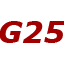
<style>
.page{position:relative;width:64px;height:64px;background:#ffffff}
.page>*{position:absolute;margin:0}
.t1{font:30px "Verdana-BoldItalic";color:#a10000}
</style>
<div class="page">
<p class="t1" style="left:0px;top:21px;width:66px;height:22px">G25</p>
</div>
